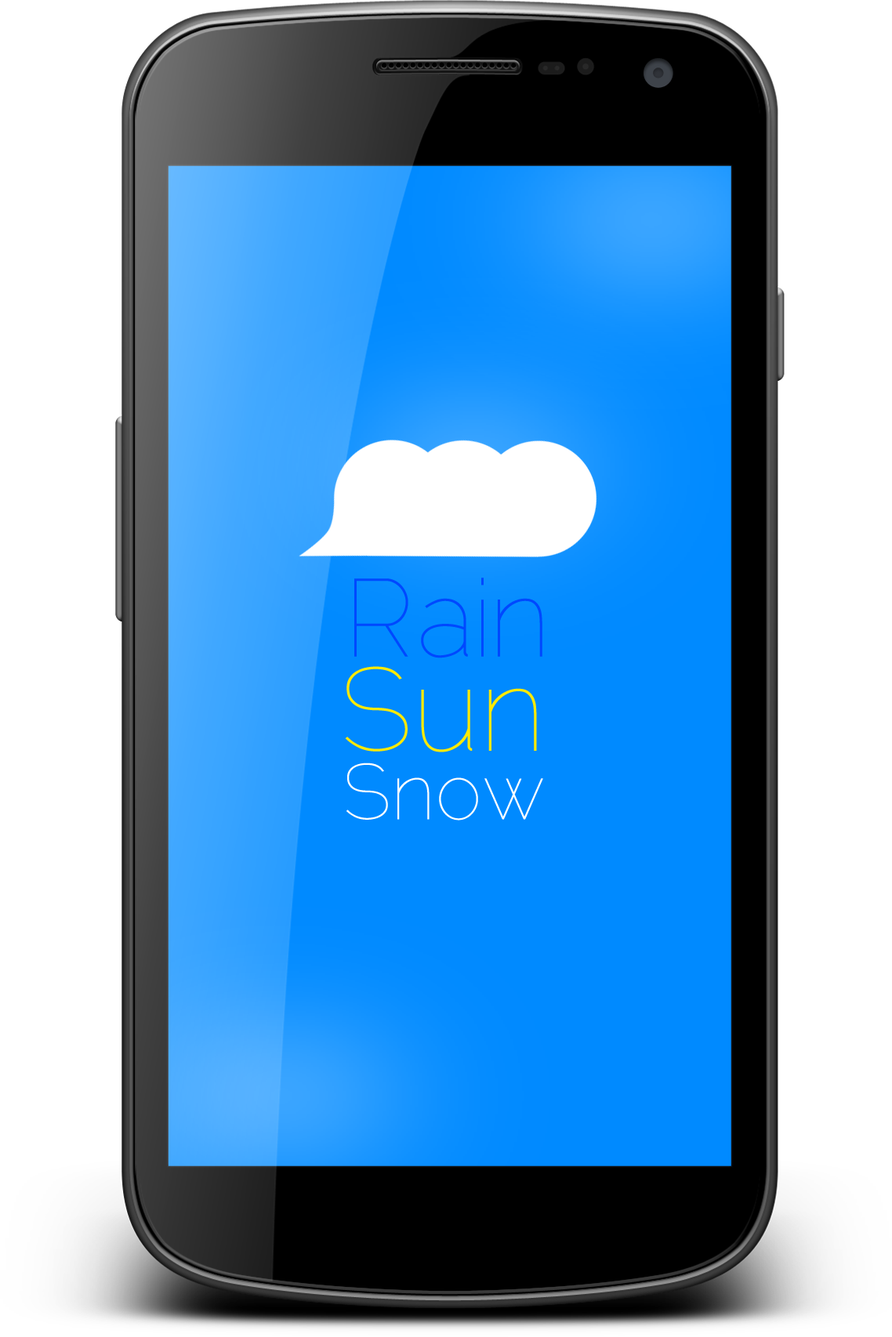
<style>
.page{position:relative;width:892px;height:1337px;background:#ffffff}
.page>*{position:absolute;margin:0}
.t1{font:109.7px "Raleway-Thin";color:#0048ff}
.t2{font:117.6px "Raleway-Thin";color:#ffea00}
.t3{font:78.4px "Raleway-Thin";color:#ffffff}
</style>
<div class="page">
<p class="t1" style="left:354px;top:578px;width:188px;height:80px">Rain</p>
<p class="t2" style="left:345px;top:666px;width:192px;height:86px">Sun</p>
<p class="t3" style="left:346px;top:763px;width:197px;height:58px">Snow</p>
</div>
